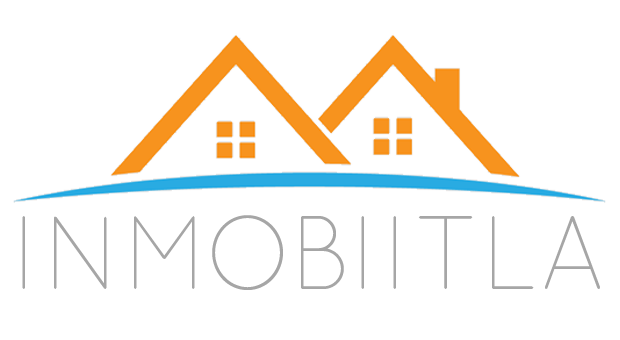
<style>
.page{position:relative;width:620px;height:340px;background:#ffffff}
.page>*{position:absolute;margin:0}
.t1{font:103.7px "QuicksandLight-Regular";color:#a6a6a6}
</style>
<div class="page">
<p class="t1" style="left:22px;top:215px;width:578px;height:75px">INMOBIITLA</p>
</div>
